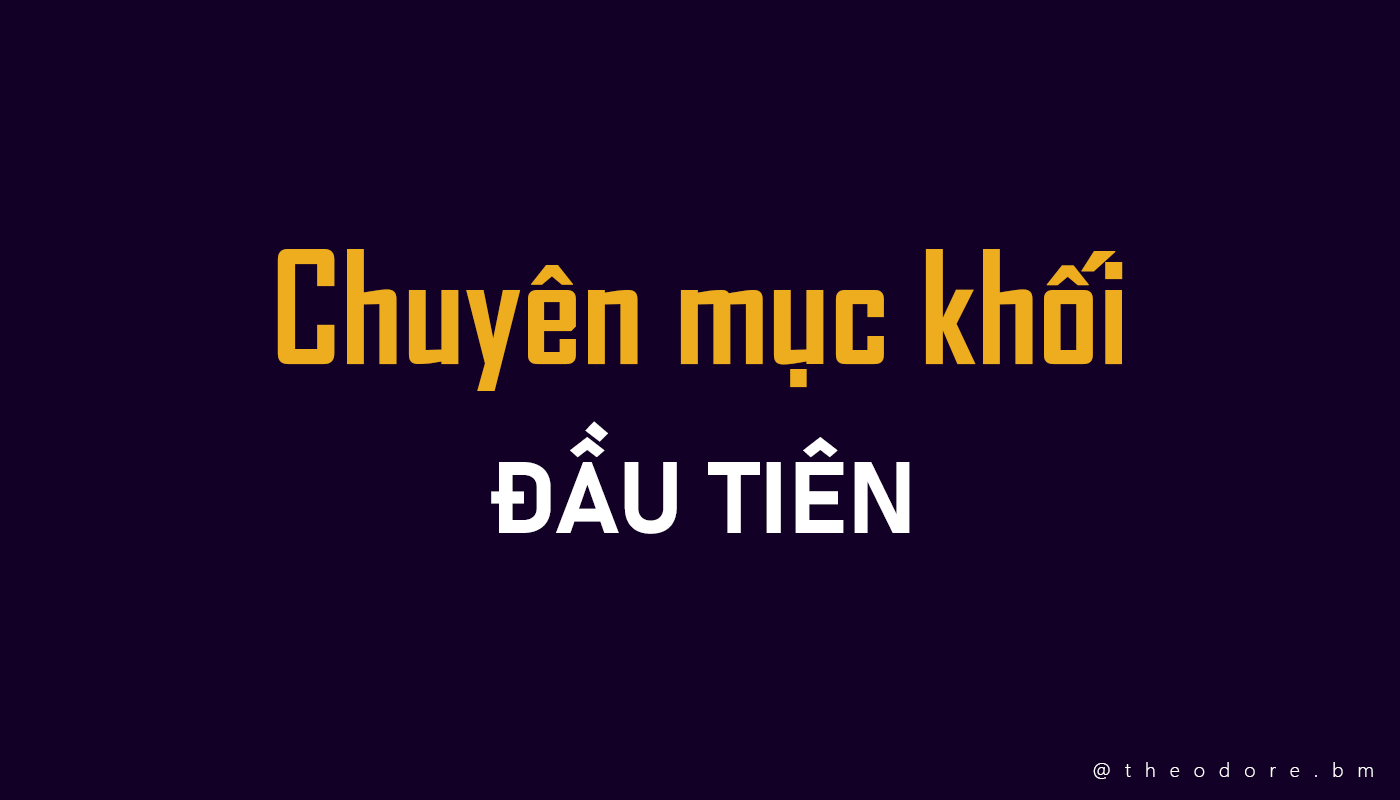
<style>
.page{position:relative;width:1400px;height:800px;background:#120026}
.page>*{position:absolute;margin:0}
.t1{font:150px "SVN-AgencyFBbold";color:#eead1f}
.t2{font:100px "Bahnschrift-Bold";color:#ffffff}
.t3{font:20px "SegoeUI-Light";letter-spacing:0.7em;color:#ffffff}
</style>
<div class="page">
<p class="t1" style="left:277px;top:249px;width:846px;height:142px">Chuyên mục khối</p>
<p class="t2" style="left:491px;top:421px;width:419px;height:113px">ĐẦU TIÊN</p>
<p class="t3" style="left:1093px;top:762px;width:280px;height:17px">@theodore.bm</p>
</div>
